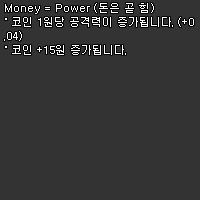
<style>
.page{position:relative;width:200px;height:200px;background:#333333}
.page>*{position:absolute;margin:0}
.t1{font:11px/14px "Dotum";color:#ffffff}
</style>
<div class="page">
<p class="t1" style="left:4px;top:3px;width:190px;height:52px">Money = Power (돈은 곧 힘)<br>˚ 코인 1원당 공격력이 증가됩니다. (+0<br>.04)<br>˚ 코인 +15원 증가됩니다.</p>
</div>
